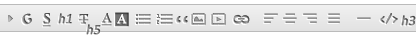
<style>
.page{position:relative;width:416px;height:36px;background:#ffffff}
.page>*{position:absolute;margin:0}
.t1{font:14px "Calligraphic";font-weight:bold}
.t2{font:14px "Castellar";font-weight:bold;text-decoration:underline}
.t3{font:14px "Calibri";font-weight:bold;font-style:italic;scale:0.95 1}
.t4{font:14px "CalifornianFB-Reg";font-weight:bold}
.t5{font:14px "CalifornianFB-Reg";font-weight:bold;text-decoration:underline}
.t6{font:14px "CalifornianFB-Reg";color:#ffffff;font-weight:bold}
.t7{font:14px "CalifornianFB-Reg";color:#898989;font-weight:bold}
.t8{font:6px "BaskOldFace";color:#747474;font-weight:bold}
.t9{font:30px "CalifornianFB-Reg";font-weight:bold;font-style:italic;scale:0.95 1}
.t10{font:14px "CalifornianFB-Reg";font-weight:bold;scale:0.89 1}
.t11{font:17.1px "CalifornianFB-Reg";color:#898989;font-weight:bold;scale:0.82 1}
.t12{font:22.4px "CambriaMath";font-weight:bold;scale:0.83 1}
.t13{font:12px "Cataclysmic";color:#878787;font-weight:bold}
.t14{font:6px "BaskOldFace";color:#7d7d7d;font-weight:bold}
.t15{font:13.6px "Candara";color:#878787;font-weight:bold;scale:0.41 1}
</style>
<div class="page">
<p class="t1" style="left:22px;top:13px;width:10px;height:12px">G</p>
<p class="t2" style="left:43px;top:13px;width:8px;height:14px">s</p>
<p class="t3" style="left:58px;top:13px;width:14px;height:11px">h1</p>
<p class="t4" style="left:79px;top:14px;width:10px;height:10px">T</p>
<p class="t5" style="left:101px;top:13px;width:11px;height:13px">A</p>
<p class="t6" style="left:117px;top:14px;width:10px;height:10px">A</p>
<p class="t7" style="left:138px;top:14px;width:13px;height:2px">__</p>
<p class="t8" style="left:157px;top:14px;width:3px;height:4px">1</p>
<p class="t7" style="left:160px;top:14px;width:13px;height:2px">__</p>
<p class="t9" style="left:176px;top:16px;width:12px;height:7px;rotate:-180deg">,,</p>
<p class="t10" style="left:191px;top:14px;width:2px;height:11px;rotate:-90deg">__</p>
<p class="t11" style="left:192px;top:13px;width:13px;height:2px">__</p>
<p class="t10" style="left:204px;top:14px;width:2px;height:11px;rotate:-90deg">__</p>
<p class="t10" style="left:211px;top:14px;width:2px;height:11px;rotate:-90deg">__</p>
<p class="t11" style="left:212px;top:13px;width:13px;height:2px">__</p>
<p class="t10" style="left:224px;top:14px;width:2px;height:11px;rotate:-90deg">__</p>
<p class="t12" style="left:233px;top:14px;width:17px;height:10px;rotate:90deg">8</p>
<p class="t13" style="left:380px;top:13px;width:18px;height:11px">&lt;/&gt;</p>
<p class="t3" style="left:401px;top:15px;width:15px;height:11px">h3</p>
<p class="t3" style="left:86px;top:24px;width:15px;height:11px">h5</p>
<p class="t7" style="left:138px;top:18px;width:13px;height:2px">__</p>
<p class="t7" style="left:138px;top:22px;width:13px;height:2px">__</p>
<p class="t14" style="left:157px;top:20px;width:2px;height:4px">2</p>
<p class="t7" style="left:160px;top:18px;width:13px;height:2px">__</p>
<p class="t7" style="left:160px;top:22px;width:13px;height:2px">__</p>
<p class="t11" style="left:192px;top:23px;width:13px;height:2px">__</p>
<p class="t11" style="left:212px;top:23px;width:13px;height:2px">__</p>
<p class="t15" style="left:238px;top:18px;width:7px;height:2px">__</p>
</div>
